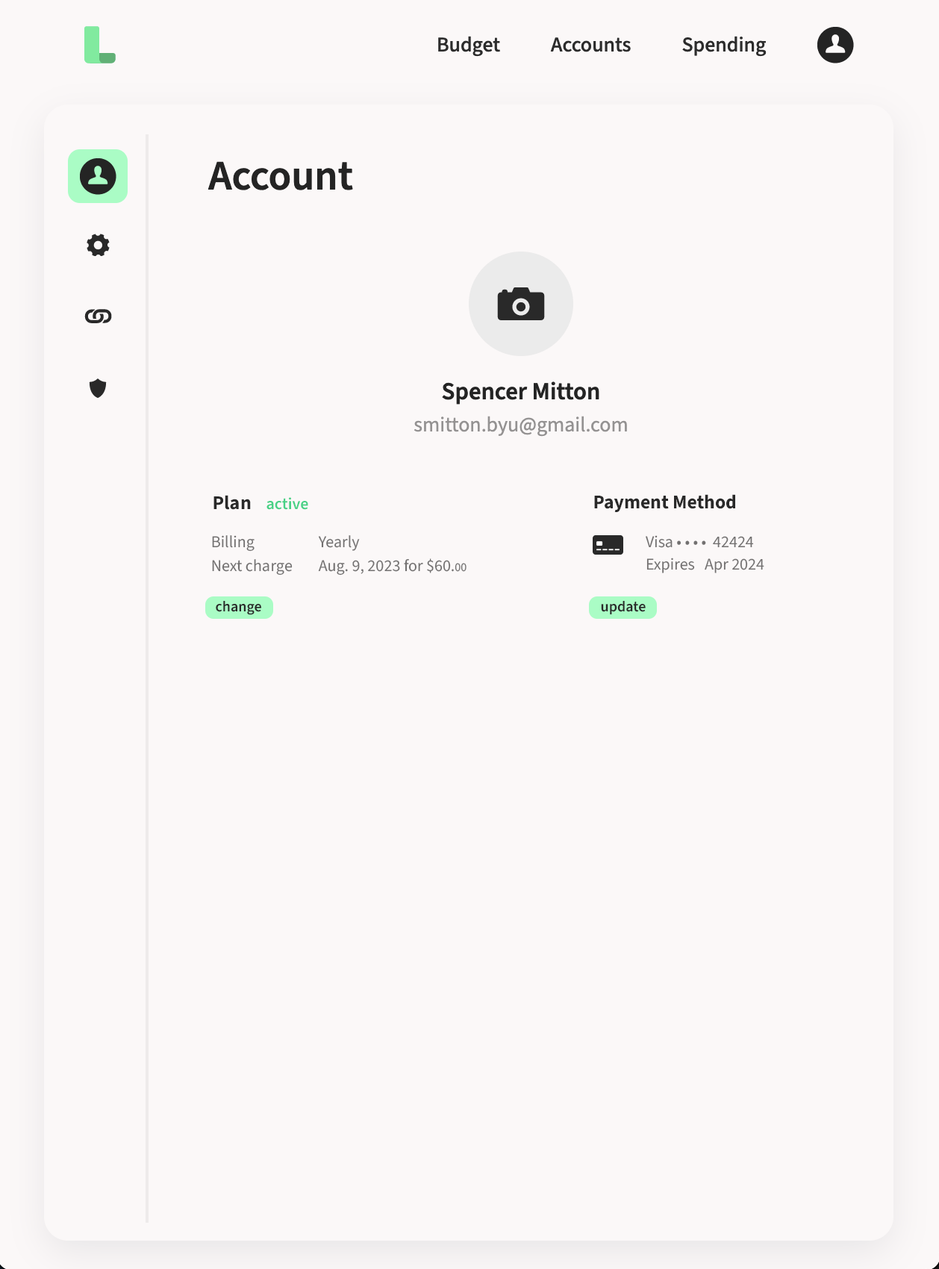
<style>
.page{position:relative;width:939px;height:1269px;background:#fbf8f8}
.page>*{position:absolute;margin:0}
.t1{font:16.4px "SourceSans3-SemiBold";color:#47d185}
.t2{font:19.4px "SourceSans3-Bold";color:#292929}
.t3{font:19.5px "SourceSans3-Bold";color:#292929}
.t4{font:16.4px/23.9px "SourceSans3-Regular";color:#727070}
.t5{font:11.9px/23.9px "SourceSans3-Regular";color:#727070}
.t6{font:16.5px/22.5px "SourceSans3-Regular";color:#727070}
.t7{font:16.5px "SourceSans3-Regular";color:#727070}
.t8{font:14.9px "SourceSans3-SemiBold";color:#292929}
</style>
<div class="page">
<p class="t1" style="left:214px;top:495px;width:94px;height:15px"><span class="t2">Plan </span>active</p>
<p class="t3" style="left:594px;top:494px;width:142px;height:18px">Payment Method</p>
<p class="t4" style="left:212px;top:535px;width:255px;height:41px">Billing   Yearly  <br>Next charge Aug. 9, 2023 for $60.<span class="t5">00</span></p>
<p class="t6" style="left:646px;top:535px;width:119px;height:38px"><span class="t7">   </span>Visa • • • •  42424  <br>   Expires   Apr 2024</p>
<p class="t8" style="left:216px;top:601px;width:45px;height:14px">change</p>
<p class="t8" style="left:601px;top:601px;width:45px;height:14px">update</p>
</div>
